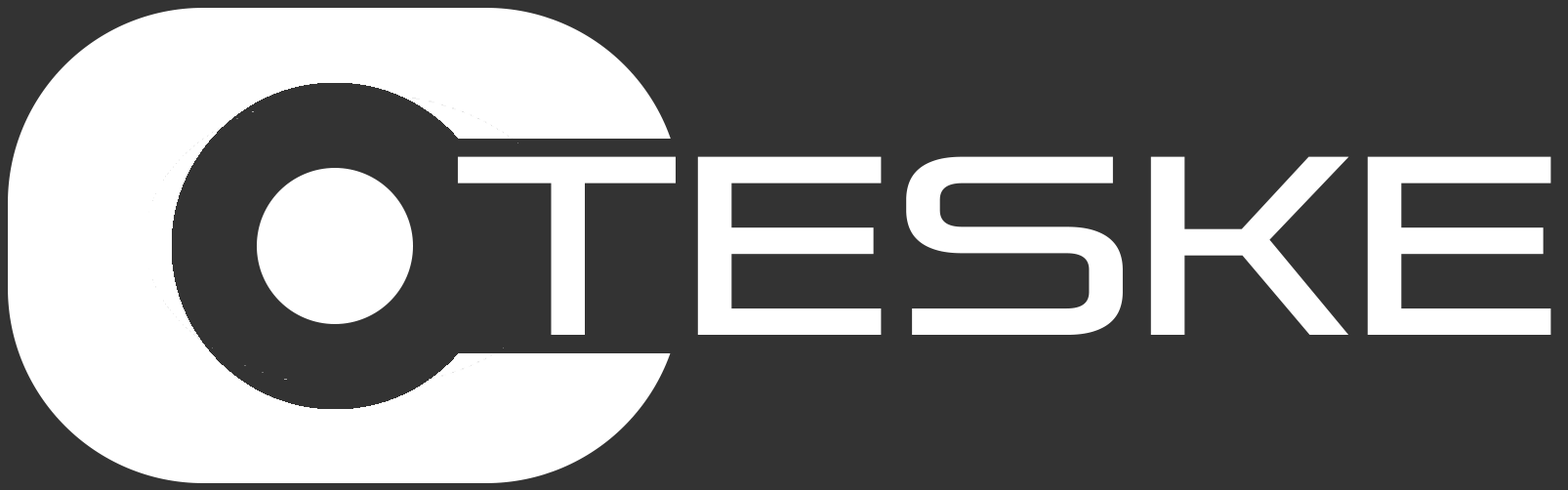
<style>
.page{position:relative;width:1568px;height:490px;background:#333333}
.page>*{position:absolute;margin:0}
.t1{font:253px "PirulenRg-Regular";color:#ffffff}
</style>
<div class="page">
<p class="t1" style="left:457px;top:156px;width:1094px;height:179px">Teske</p>
</div>
